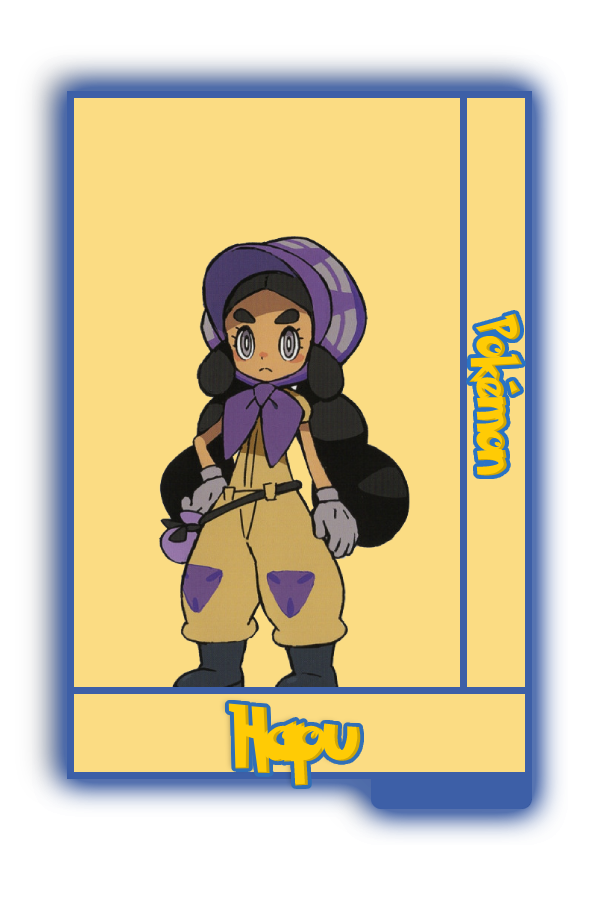
<style>
.page{position:relative;width:600px;height:900px;background:#fbdc83}
.page>*{position:absolute;margin:0}
.t1{font:48.8px "PokemonSolidNormal";color:#ffcb05;scale:0.8 1}
.t2{font:60.1px "PokemonSolidNormal";color:#ffcb05;scale:0.96 1}
</style>
<div class="page">
<p class="t1" style="left:469px;top:313px;width:54px;height:163px;rotate:90deg">Pokémon</p>
<p class="t2" style="left:228px;top:703px;width:133px;height:83px">Hapu</p>
</div>
